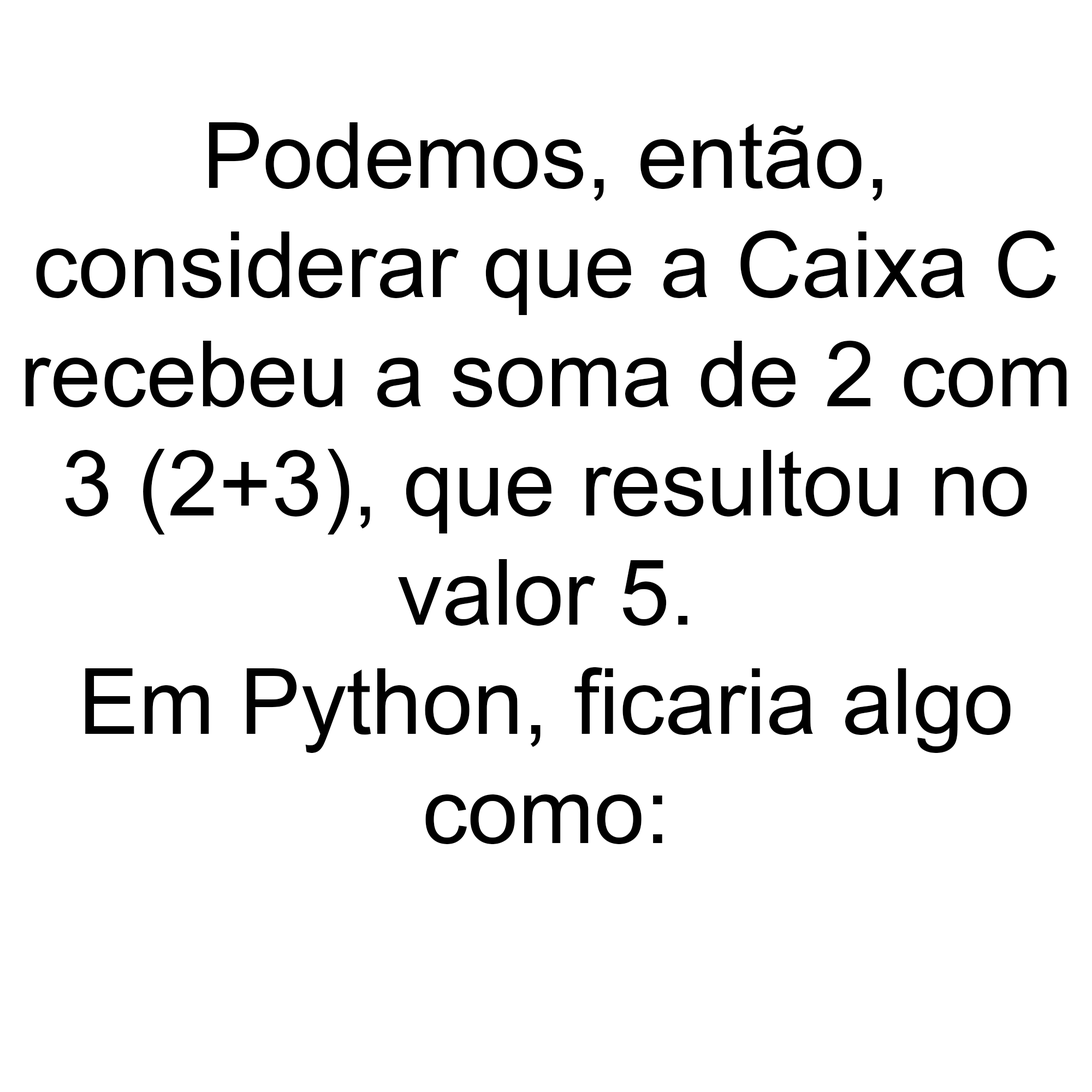
<style>
.page{position:relative;width:1092px;height:1092px;background:#ffffff}
.page>*{position:absolute;margin:0}
.t1{font:91px "ArialMT";color:#000000}
</style>
<div class="page">
<p class="t1" style="left:25px;top:122px;width:1042px;height:722px;text-align:center">Podemos, então,<br>considerar que a Caixa C<br>recebeu a soma de 2 com<br>3 (2+3), que resultou no<br>valor 5.<br>Em Python, ficaria algo<br>como:</p>
</div>
